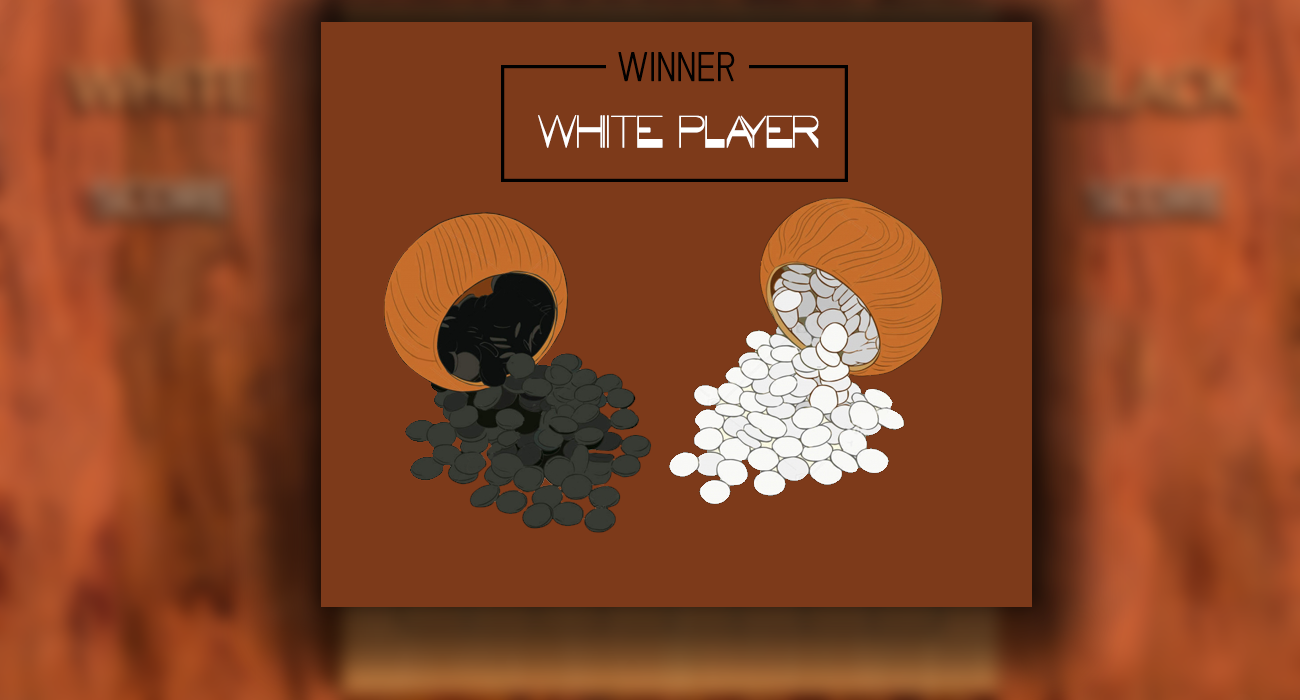
<style>
.page{position:relative;width:1300px;height:700px;background:#7d3a1a}
.page>*{position:absolute;margin:0}
.t1{font:43.6px "The_Bellovia_Sans";color:#010101}
.t2{font:52.1px "WINNER";color:#ffffff}
</style>
<div class="page">
<p class="t1" style="left:618px;top:52px;width:117px;height:30px">WINNER</p>
<p class="t2" style="left:538px;top:115px;width:281px;height:33px">WHIITE PLAYER</p>
</div>
